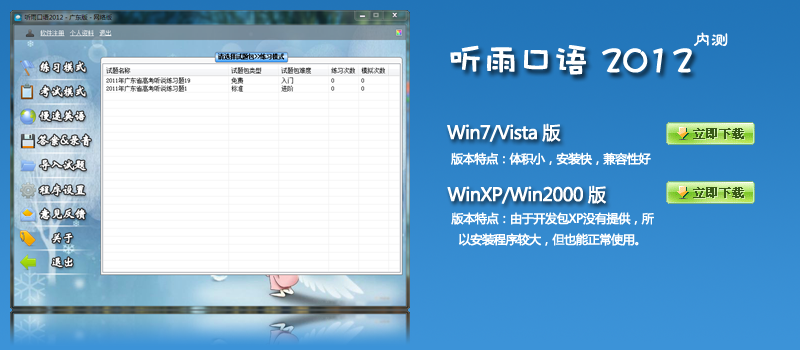
<style>
.page{position:relative;width:800px;height:350px}
.page>*{position:absolute;margin:0}
.t1{font:18px "FZLBJW--GB1-0";letter-spacing:-0.05em;color:#ffffff;font-weight:bold}
.t2{font:36px "DFPWaWaW5";letter-spacing:-0.05em;color:#ffffff;font-weight:bold}
.t3{font:18px "MicrosoftYaHei";letter-spacing:-0.05em;color:#ffffff;font-weight:bold}
.t4{font:12px "MicrosoftYaHei";letter-spacing:-0.05em;color:#ffffff;font-weight:bold}
</style>
<div class="page">
<p class="t1" style="left:694px;top:32px;width:34px;height:15px">内测</p>
<p class="t2" style="left:450px;top:45px;width:242px;height:30px">听雨口语 2012</p>
<p class="t3" style="left:447px;top:123px;width:114px;height:19px">Win7/Vista 版</p>
<p class="t4" style="left:451px;top:152px;width:200px;height:13px">版本特点：体积小，安装快，兼容性好</p>
<p class="t3" style="left:447px;top:185px;width:159px;height:19px">WinXP/Win2000 版</p>
<p class="t4" style="left:451px;top:212px;width:203px;height:34px;text-align:center">版本特点：由于开发包XP没有提供，所以安装程序较大，但也能正常使用。</p>
</div>
